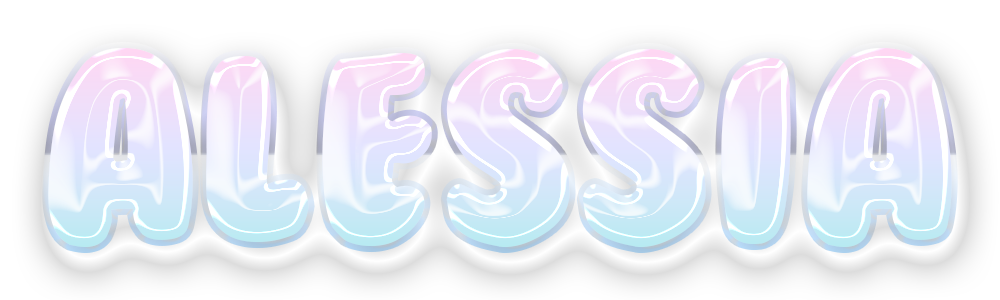
<style>
.page{position:relative;width:1000px;height:300px}
.page>*{position:absolute;margin:0}
.t1{font:247.4px "BubbleGum"}
</style>
<div class="page">
<p class="t1" style="left:48px;top:48px;width:904px;height:199px">ALESSIA</p>
<p class="t1" style="left:48px;top:48px;width:904px;height:199px">ALESSIA</p>
</div>
